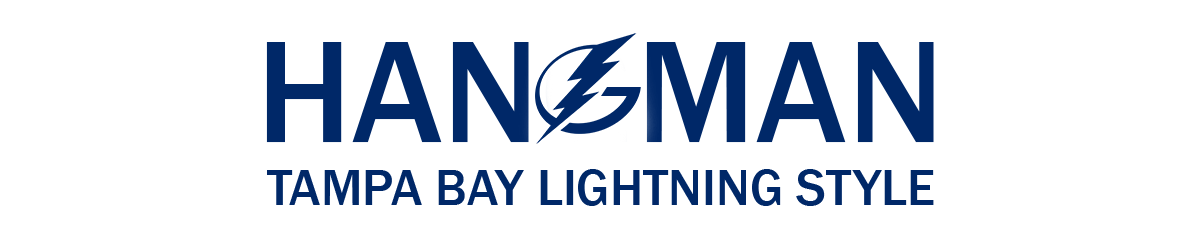
<style>
.page{position:relative;width:1200px;height:250px;background:#ffffff}
.page>*{position:absolute;margin:0}
.t1{font:150px "FranklinGothic-Medium";color:#002868}
.t2{font:52px "FranklinGothic-Medium";color:#002868}
</style>
<div class="page">
<p class="t1" style="left:266px;top:41px;width:668px;height:102px">HANGMAN</p>
<p class="t2" style="left:267px;top:169px;width:667px;height:37px">TAMPA BAY LIGHTNING STYLE</p>
</div>
